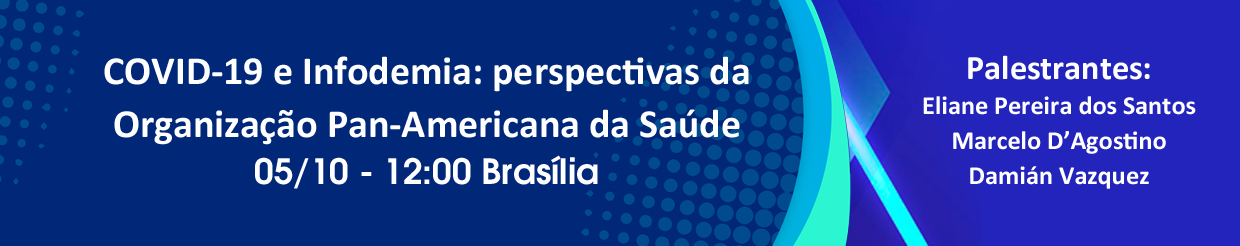
<style>
.page{position:relative;width:1240px;height:246px;background:#002778}
.page>*{position:absolute;margin:0}
.t1{font:40px "Calibri-Bold";color:#ffffff}
.t2{font:35px "TeXGyreAdventor-Bold";color:#ffffff}
.t3{font:26.2px "Calibri-Bold";color:#ffffff}
.t4{font:34.2px "Calibri-Bold";color:#ffffff}
</style>
<div class="page">
<p class="t1" style="left:104px;top:56px;width:645px;height:133px;text-align:center">COVID-19 e Infodemia: perspectivas da<br>Organização Pan-Americana da Saúde<br><span class="t2">05/10 - 12:00 Brasília</span></p>
<p class="t3" style="left:923px;top:55px;width:273px;height:134px;text-align:center"><span class="t4">Palestrantes:<br></span>Eliane Pereira dos Santos<br>Marcelo D’Agostino<br>Damián Vazquez</p>
</div>
